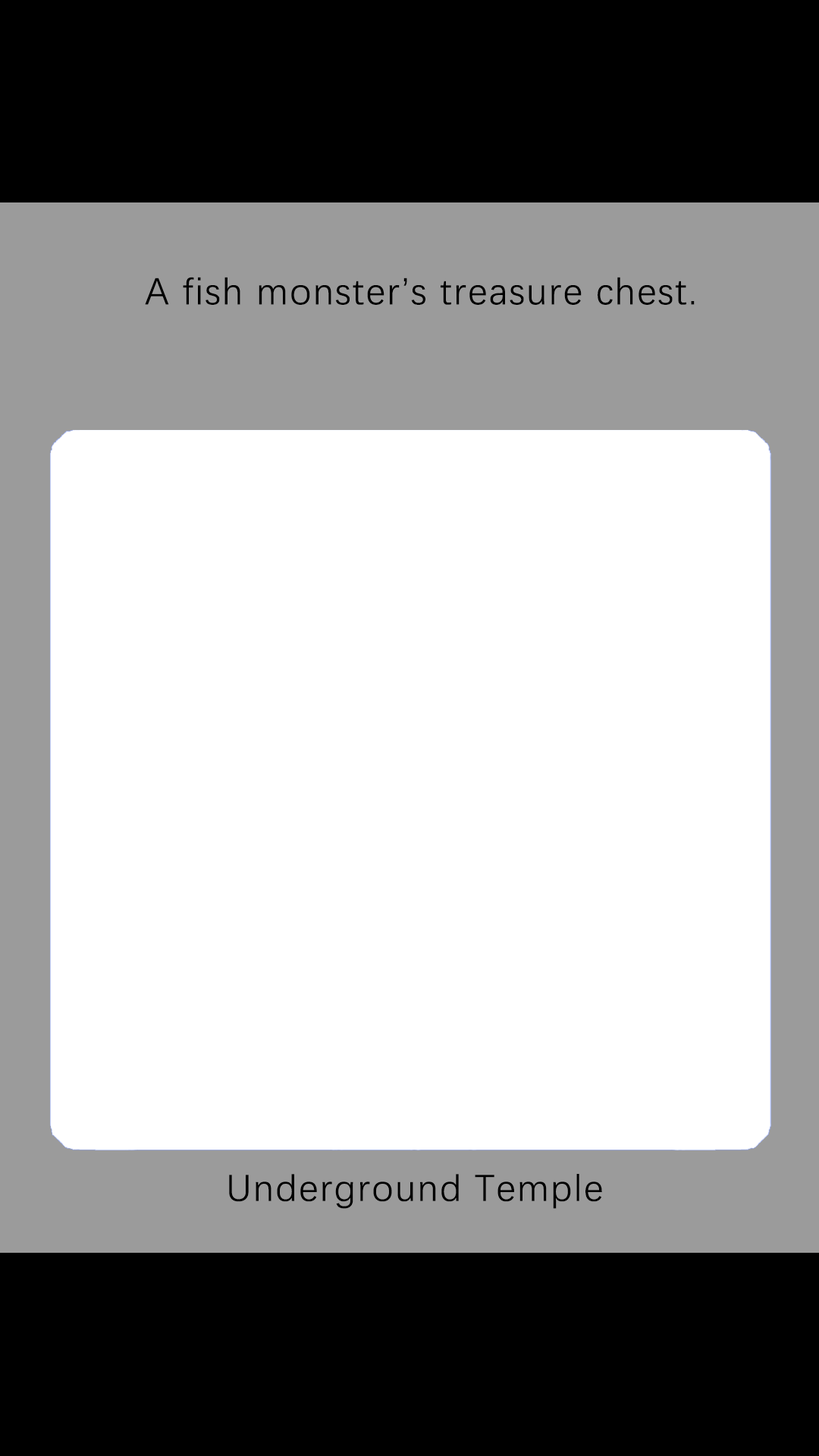
<style>
.page{position:relative;width:819px;height:1456px;background:#ffffff}
.page>*{position:absolute;margin:0}
.t1{font:37.9px "DengXian-Regular";letter-spacing:0.04em;color:#000000}
</style>
<div class="page">
<p class="t1" style="left:145px;top:277px;width:550px;height:28px">A fish monster’s treasure chest.</p>
<p class="t1" style="left:229px;top:1174px;width:373px;height:35px">Underground Temple</p>
</div>
